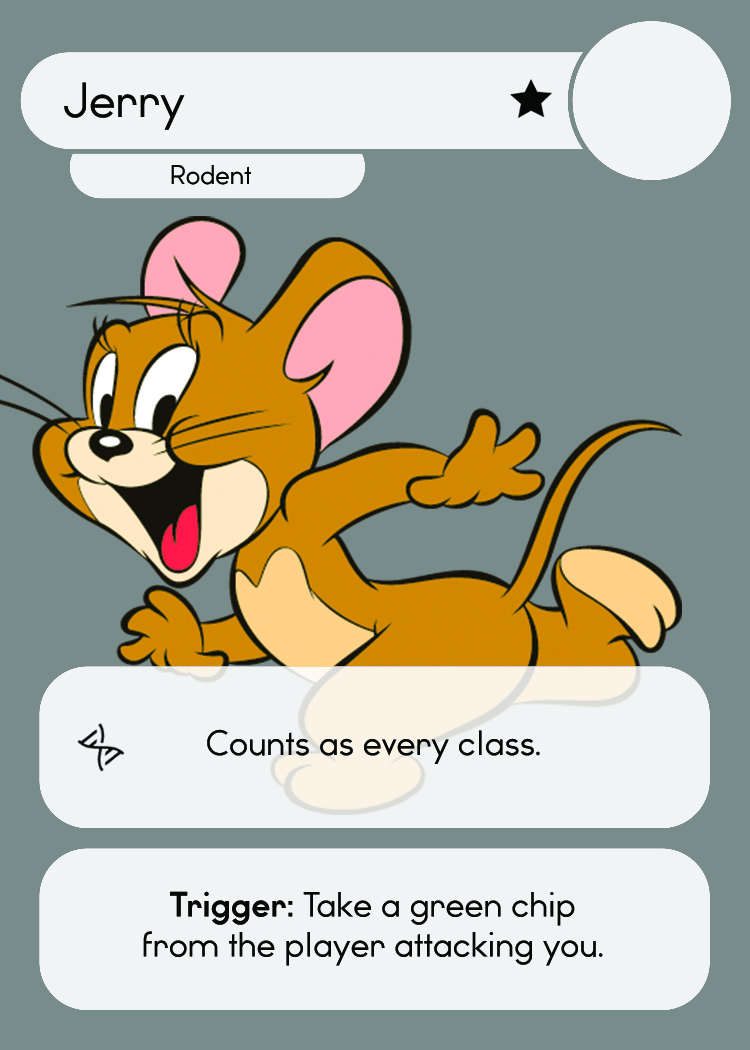
<style>
.page{position:relative;width:750px;height:1050px;background:#788c8c}
.page>*{position:absolute;margin:0}
.t1{font:46.7px "WatchwordRegularDemo";color:#060808}
.t2{font:25.5px "WatchwordRegularDemo";color:#060808}
.t3{font:33.3px "WatchwordRegularDemo";color:#060808}
.t4{font:33.3px "Dosis-Medium";color:#060808}
.t5{font:33.3px "WatchwordBoldDemo";color:#060808}
</style>
<div class="page">
<p class="t1" style="left:64px;top:82px;width:121px;height:48px">Jerry</p>
<p class="t2" style="left:171px;top:165px;width:80px;height:20px">Rodent</p>
<p class="t3" style="left:207px;top:729px;width:333px;height:35px">Counts as every class<span class="t4">.</span></p>
<p class="t3" style="left:143px;top:891px;width:460px;height:75px;text-align:center"><span class="t5">Trigger: </span>Take a green chip<br>from the player attacking you<span class="t4">.</span></p>
</div>
